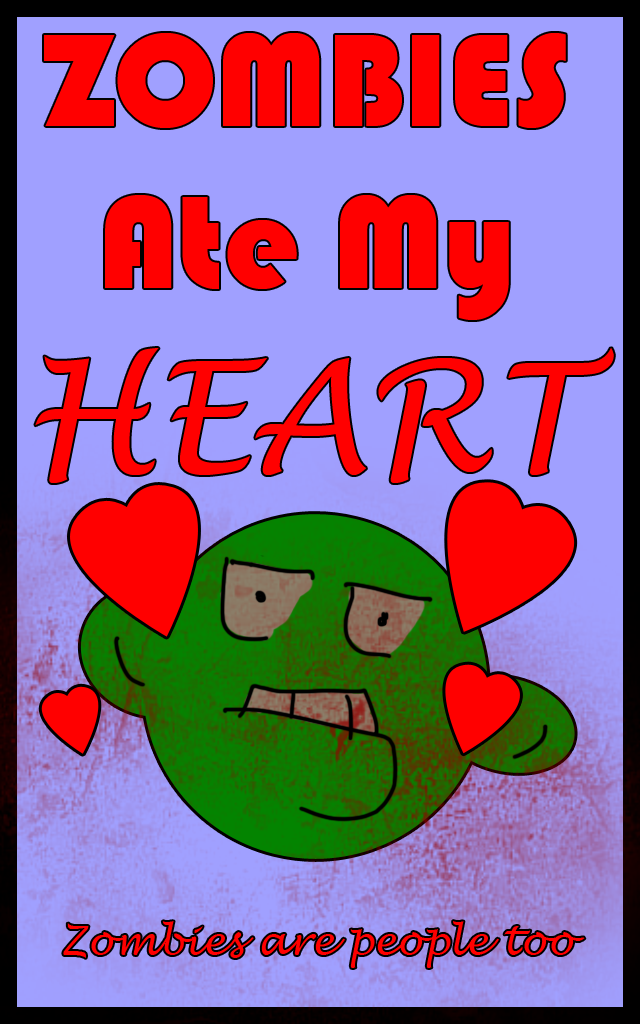
<style>
.page{position:relative;width:640px;height:1024px;background:#a0a0ff}
.page>*{position:absolute;margin:0}
.t1{font:135.5px "Bauhaus93";color:#ff0000}
.t2{font:152.9px "LucidaHandwriting-Italic";color:#ff0000}
.t3{font:40.4px "LucidaHandwriting-Italic";color:#ff0000}
</style>
<div class="page">
<p class="t1" style="left:35px;top:33px;width:579px;height:450px;text-align:center">ZOMBIES<br>Ate My<br><span class="t2">HEART</span></p>
<p class="t3" style="left:63px;top:921px;width:522px;height:47px">Zombies are people too</p>
</div>
